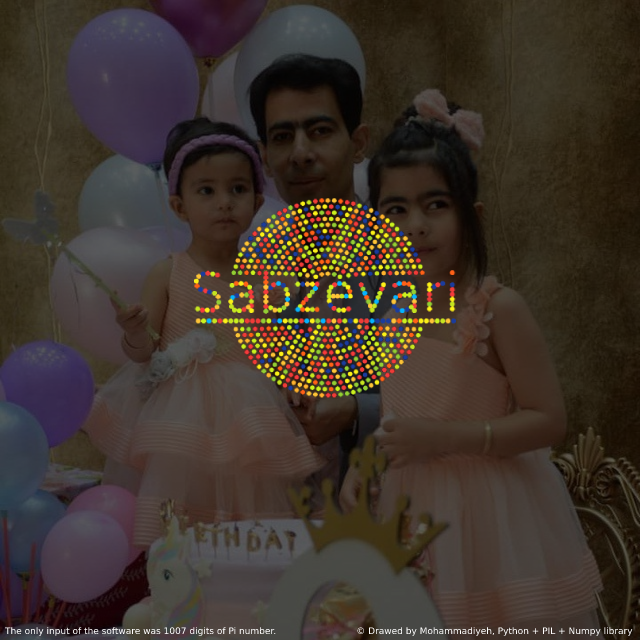
<style>
.page{position:relative;width:640px;height:640px}
.page>*{position:absolute;margin:0}
.t1{font:9px "DejaVuSans";color:#ffffff}
</style>
<div class="page">
<p class="t1" style="left:4px;top:627px;width:629px;height:9px">The only input of the software was 1007 digits of Pi number.                            © Drawed by Mohammadiyeh, Python + PIL + Numpy library</p>
</div>
